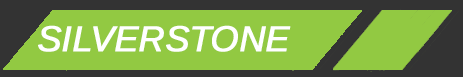
<style>
.page{position:relative;width:463px;height:77px;background:#92c942}
.page>*{position:absolute;margin:0}
.t1{font:36px "Arimo-Italic";letter-spacing:-0.02em;color:#ffffff;font-weight:bold}
</style>
<div class="page">
<p class="t1" style="left:38px;top:25px;width:253px;height:27px">SILVERSTONE</p>
</div>
